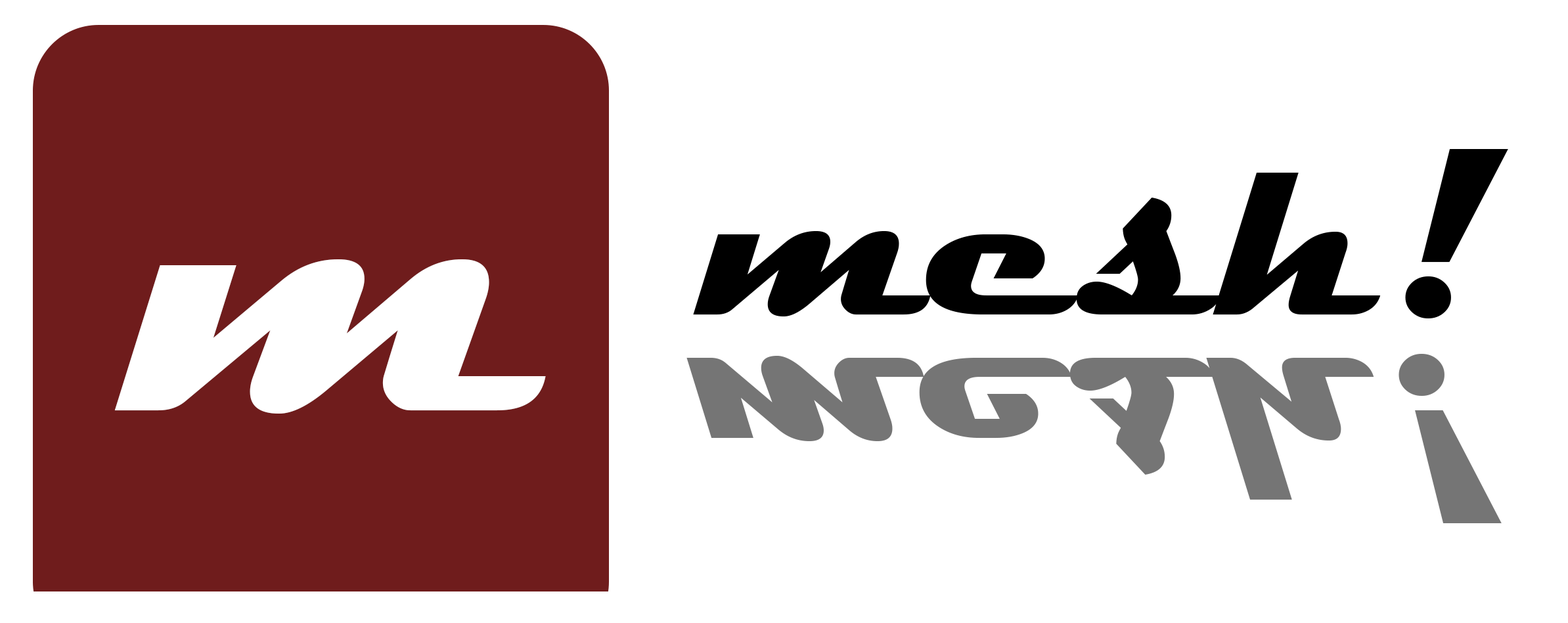
<style>
.page{position:relative;width:1568px;height:623px;background:#ffffff}
.page>*{position:absolute;margin:0}
.t1{font:241.1px "Magneto-Bold";color:#000000}
.t2{font:437.4px "Magneto-Bold";color:#ffffff}
.t3{font:241.1px "Magneto-Bold";color:#757575}
</style>
<div class="page">
<p class="t1" style="left:693px;top:149px;width:815px;height:170px">mesh!</p>
<p class="t2" style="left:114px;top:259px;width:432px;height:155px">m</p>
<p class="t3" style="left:686px;top:354px;width:816px;height:170px">mesh!</p>
</div>
